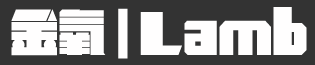
<style>
.page{position:relative;width:315px;height:65px;background:#333333}
.page>*{position:absolute;margin:0}
.t1{font:48px "MFJinHei_Noncommercial-Regular";color:#fffefe}
</style>
<div class="page">
<p class="t1" style="left:11px;top:7px;width:296px;height:52px">金氧 | Lamb</p>
</div>
